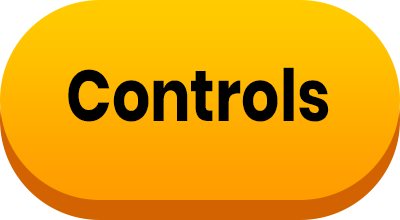
<style>
.page{position:relative;width:400px;height:220px}
.page>*{position:absolute;margin:0}
.t1{font:72px "Poppins-Bold";color:#000000;scale:0.83 1}
</style>
<div class="page">
<p class="t1" style="left:68px;top:67px;width:261px;height:55px">Controls</p>
</div>
